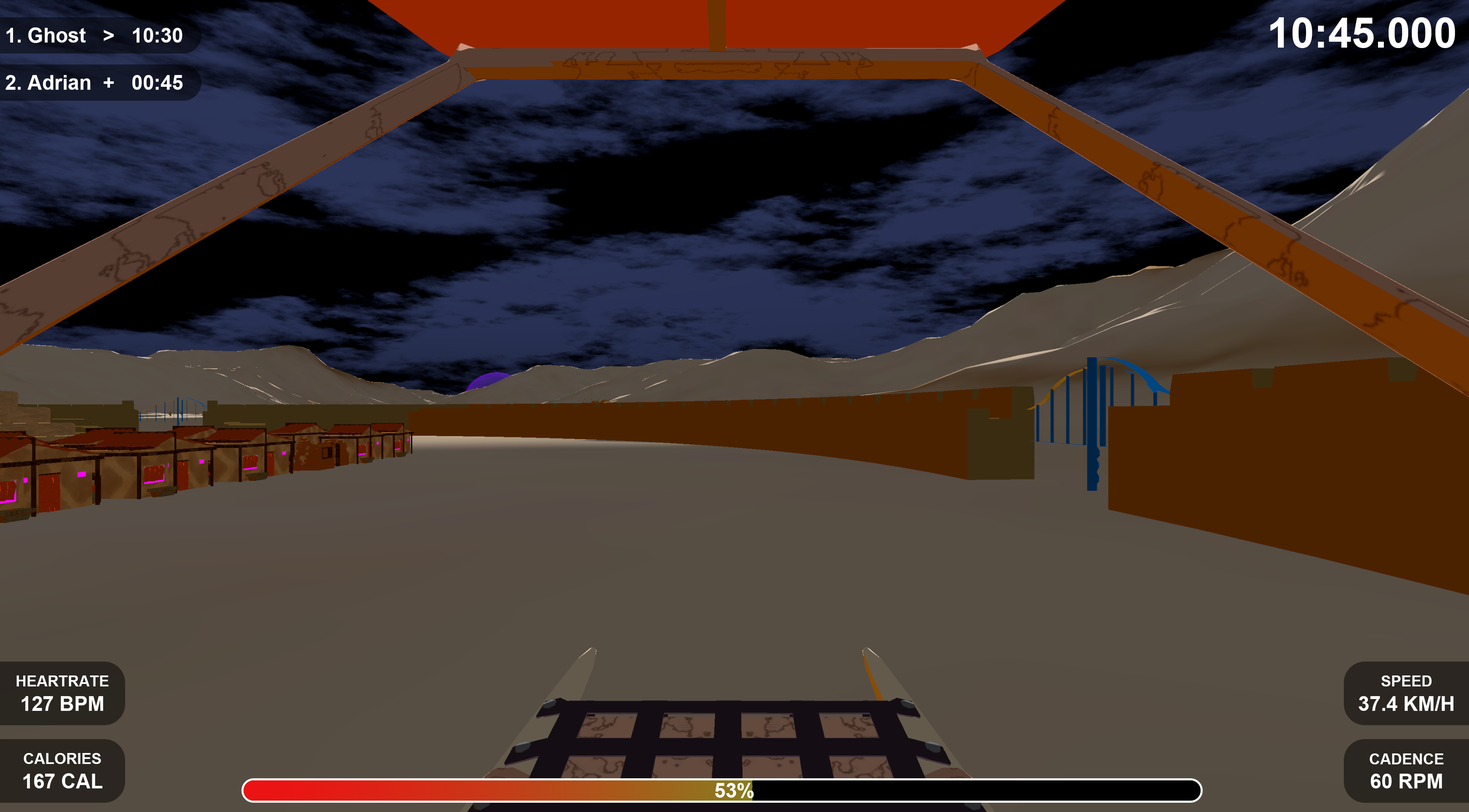
<style>
.page{position:relative;width:1469px;height:812px}
.page>*{position:absolute;margin:0}
.t1{font:42.1px "Arial-BoldMT";color:#ffffff}
.t2{font:20.2px "Arial-BoldMT";color:#ffffff}
.t3{font:15.2px "Arial-BoldMT";color:#ffffff}
</style>
<div class="page">
<p class="t1" style="left:1270px;top:17px;width:185px;height:31px">10:45.000</p>
<p class="t2" style="left:6px;top:27px;width:176px;height:16px">1. Ghost   &gt;   10:30</p>
<p class="t2" style="left:5px;top:75px;width:178px;height:15px">2. Adrian  +   00:45</p>
<p class="t3" style="left:16px;top:675px;width:93px;height:36px;text-align:center">HEARTRATE<br><span class="t2">127 BPM</span></p>
<p class="t2" style="left:1358px;top:675px;width:95px;height:36px;text-align:center"><span class="t3">SPEED<br></span>37.4 KM/H</p>
<p class="t3" style="left:23px;top:753px;width:79px;height:35px;text-align:center">CALORIES<br><span class="t2">167 CAL</span></p>
<p class="t3" style="left:1369px;top:753px;width:74px;height:35px;text-align:center">CADENCE<br><span class="t2">60 RPM</span></p>
<p class="t2" style="left:715px;top:783px;width:39px;height:15px">53%</p>
</div>
